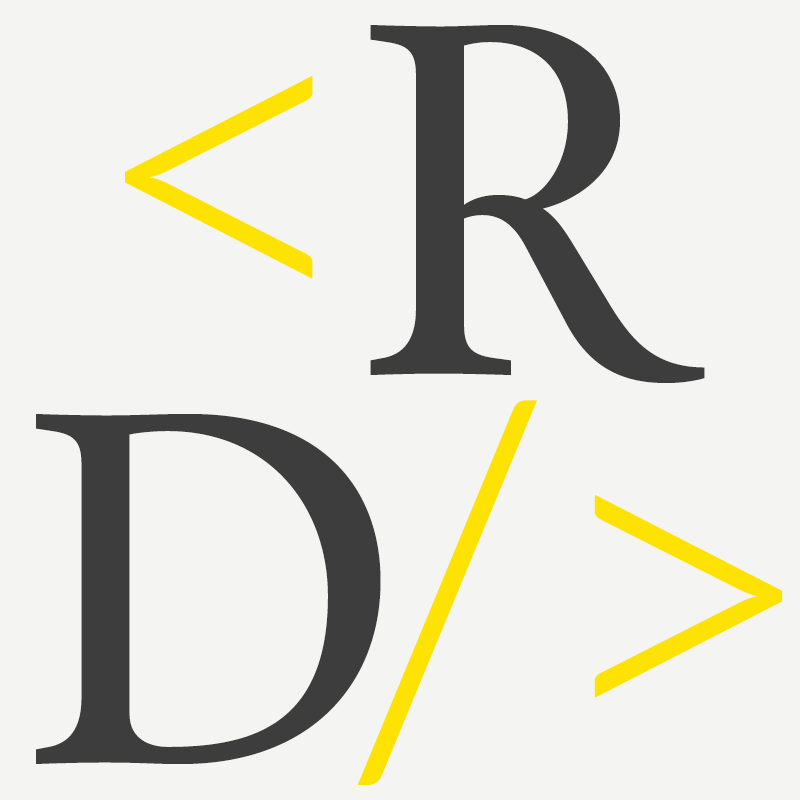
<style>
.page{position:relative;width:800px;height:800px;background:#f4f4f2}
.page>*{position:absolute;margin:0}
.t1{font:500px "Calendas-Plus";letter-spacing:-0.01em;color:#3d3d3d}
.t2{font:500px "Lato-Light";letter-spacing:-0.01em;color:#fee202}
</style>
<div class="page">
<p class="t1" style="left:370px;top:25px;width:335px;height:358px">R</p>
<p class="t2" style="left:124px;top:75px;width:189px;height:204px">&lt;</p>
<p class="t2" style="left:357px;top:400px;width:426px;height:385px">/&gt;</p>
<p class="t1" style="left:36px;top:414px;width:345px;height:350px">D</p>
</div>
